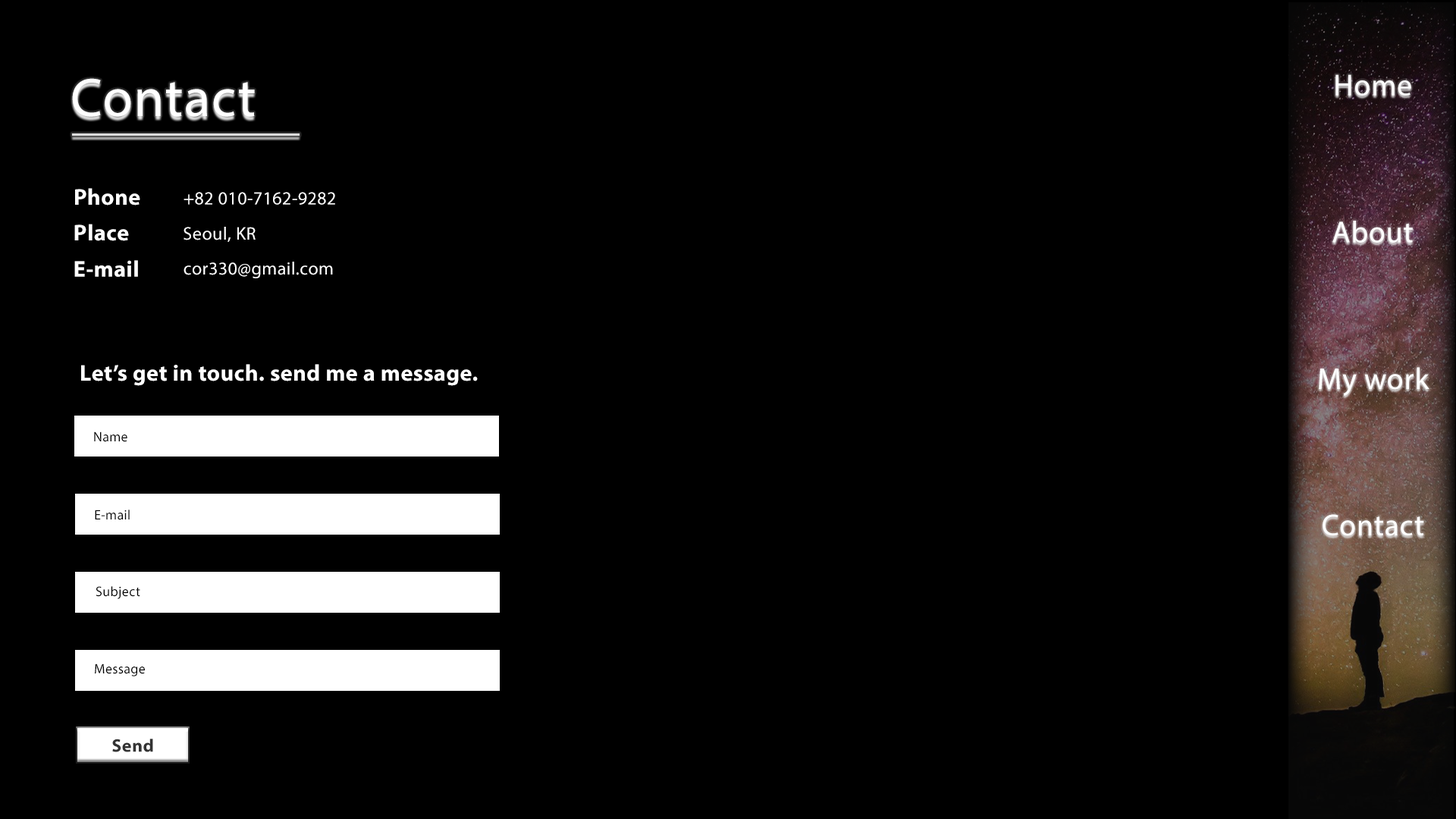
<style>
.page{position:relative;width:1456px;height:819px;background:#000000}
.page>*{position:absolute;margin:0}
.t1{font:30.3px "MyriadPro-Regular";letter-spacing:0.02em;color:#ffffff}
.t2{font:54.6px "MyriadPro-Regular";letter-spacing:0.02em;color:#ffffff}
.t3{font:22.8px "MyriadPro-Bold";letter-spacing:0.02em;color:#ffffff}
.t4{font:18.3px "MyriadPro-Regular";letter-spacing:0.02em;color:#ffffff}
.t5{font:22.7px "MyriadPro-Bold";letter-spacing:0.02em;color:#ffffff}
.t6{font:18.2px "MyriadPro-Regular";letter-spacing:0.02em;color:#ffffff}
.t7{font:18.1px "MyriadPro-Regular";letter-spacing:0.02em;color:#ffffff}
.t8{font:13.6px "MyriadPro-Regular";letter-spacing:0.02em;color:#000000}
.t9{font:18.2px "MyriadPro-Bold";letter-spacing:0.02em;color:#333333}
</style>
<div class="page">
<p class="t1" style="left:1335px;top:74px;width:76px;height:22px">Home</p>
<p class="t2" style="left:72px;top:78px;width:183px;height:39px">Contact</p>
<p class="t3" style="left:75px;top:188px;width:65px;height:18px">Phone</p>
<p class="t4" style="left:184px;top:192px;width:151px;height:13px">+82 010-7162-9282</p>
<p class="t1" style="left:1332px;top:221px;width:81px;height:22px">About</p>
<p class="t5" style="left:74px;top:224px;width:55px;height:17px">Place</p>
<p class="t6" style="left:184px;top:227px;width:72px;height:15px">Seoul, KR</p>
<p class="t5" style="left:74px;top:260px;width:64px;height:17px">E-mail</p>
<p class="t7" style="left:184px;top:262px;width:149px;height:16px">cor330@gmail.com</p>
<p class="t3" style="left:81px;top:364px;width:397px;height:22px">Let’s get in touch. send me a message.</p>
<p class="t1" style="left:1319px;top:367px;width:110px;height:29px">My work</p>
<p class="t8" style="left:94px;top:431px;width:33px;height:11px">Name</p>
<p class="t8" style="left:95px;top:510px;width:35px;height:10px">E-mail</p>
<p class="t1" style="left:1323px;top:514px;width:101px;height:22px">Contact</p>
<p class="t8" style="left:96px;top:586px;width:44px;height:13px">Subject</p>
<p class="t8" style="left:95px;top:664px;width:50px;height:12px">Message</p>
<p class="t9" style="left:112px;top:739px;width:41px;height:13px">Send</p>
</div>
